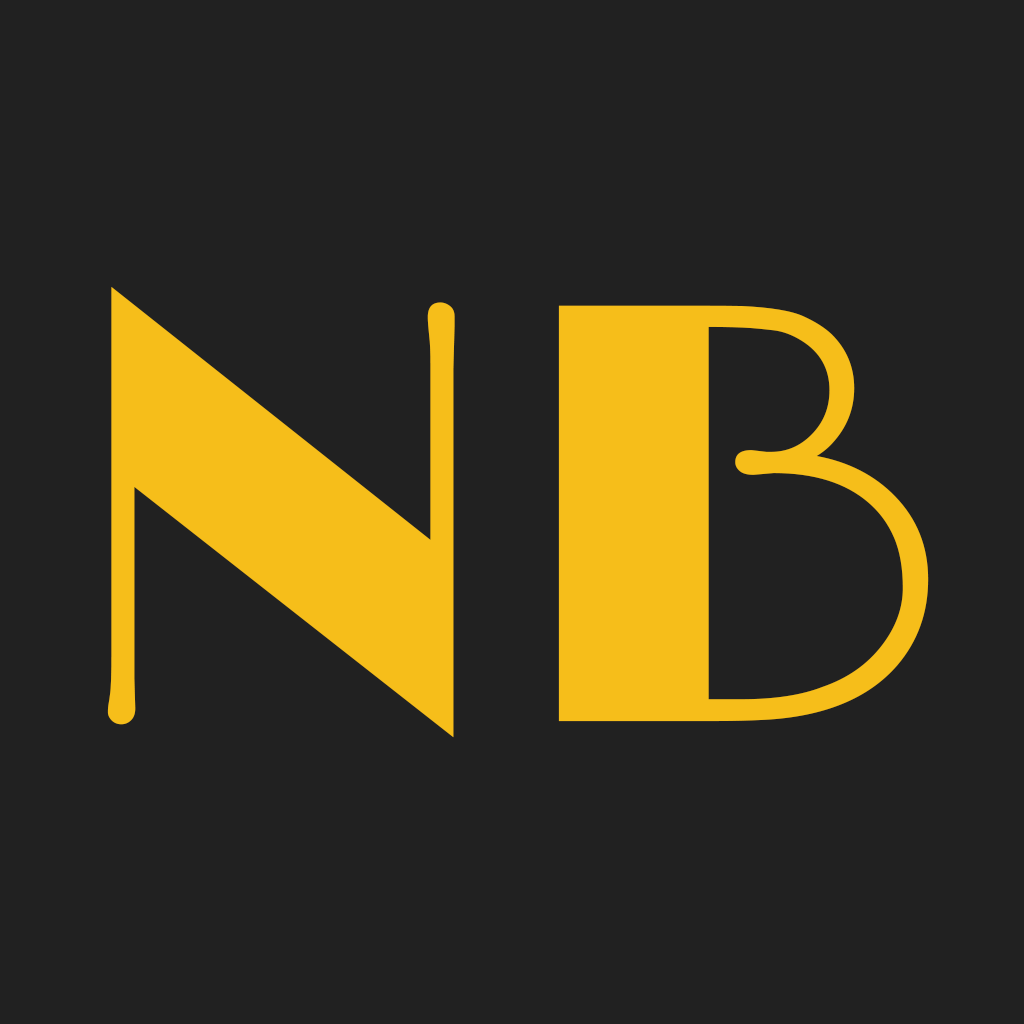
<style>
.page{position:relative;width:1024px;height:1024px;background:#212121}
.page>*{position:absolute;margin:0}
.t1{font:601px "Limelight-Regular";color:#f6be1a}
</style>
<div class="page">
<p class="t1" style="left:107px;top:286px;width:822px;height:452px">NB</p>
</div>
